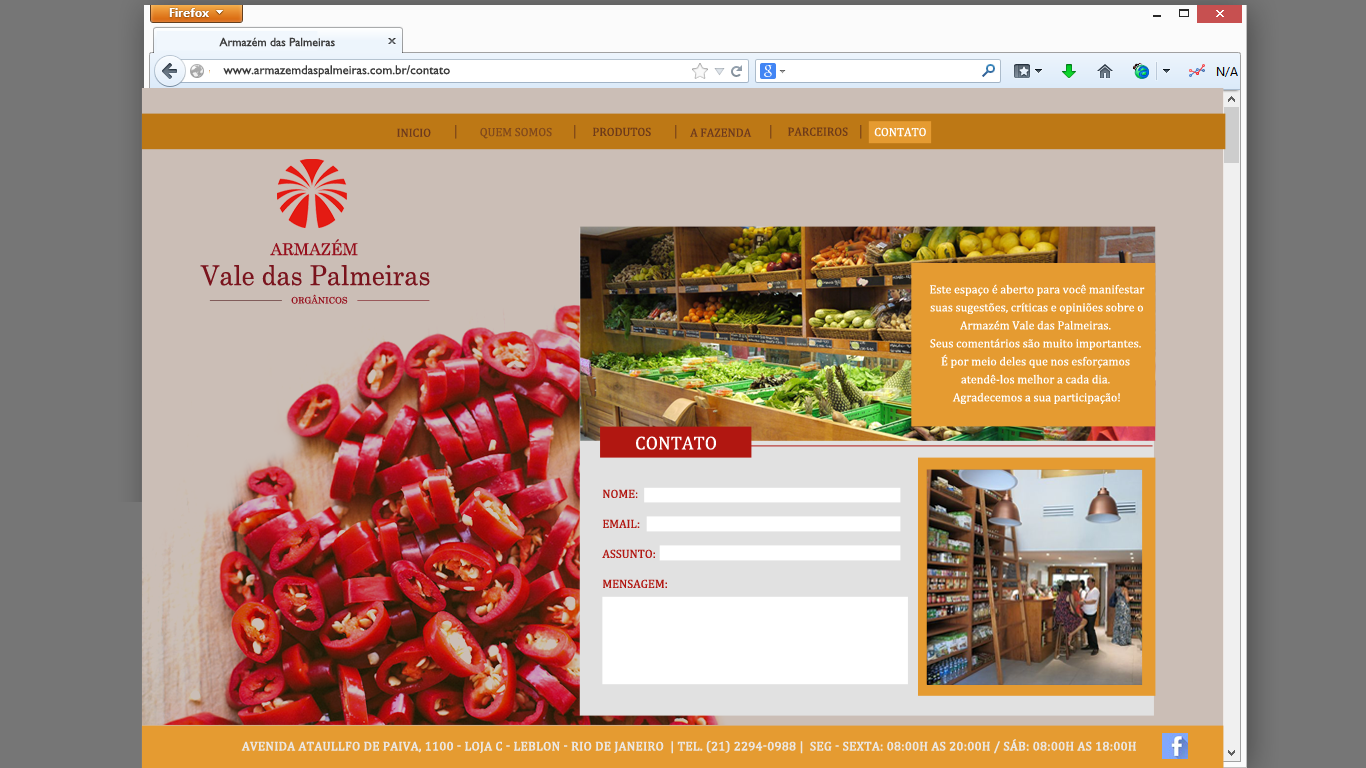
<style>
.page{position:relative;width:1366px;height:768px;background:#cbbeb6}
.page>*{position:absolute;margin:0}
.t1{font:12px "GillSansMT";color:#3c3c3c}
.t2{font:12.8px "GillSansMT";color:#3c3c3c}
.t3{font:12px "Cambria";color:#6d3a1d}
.t4{font:12px "Cambria";color:#81491b}
.t5{font:12px "Cambria";color:#6d3a19}
.t6{font:12px "Cambria";color:#ffffff}
.t7{font:16.2px "Century";color:#96101d}
.t8{font:27.3px "Century";color:#7a141d;scale:0.94 1}
.t9{font:8.9px "Century";color:#96101d}
.t10{font:12px/18px "Cambria";color:#ffffff}
.t11{font:18.8px "Cambria";color:#ffffff}
.t12{font:12px/30px "Cambria";color:#b11711}
.t13{font:12.5px "Cambria";color:#ebe7e2;text-transform:uppercase;font-weight:bold}
</style>
<div class="page">
<p class="t1" style="left:219px;top:37px;width:116px;height:10px">Armazém das Palmeiras</p>
<p class="t2" style="left:223px;top:65px;width:227px;height:13px">www.armazemdaspalmeiras.com.br/contato</p>
<p class="t3" style="left:397px;top:128px;width:34px;height:9px">INICIO</p>
<p class="t4" style="left:480px;top:127px;width:72px;height:12px">QUEM SOMOS</p>
<p class="t5" style="left:593px;top:127px;width:58px;height:9px">PRODUTOS</p>
<p class="t3" style="left:690px;top:128px;width:62px;height:9px">A FAZENDA</p>
<p class="t5" style="left:788px;top:127px;width:60px;height:9px">PARCEIROS</p>
<p class="t6" style="left:874px;top:127px;width:52px;height:10px">CONTATO</p>
<p class="t7" style="left:270px;top:239px;width:88px;height:17px">ARMAZÉM</p>
<p class="t8" style="left:200px;top:265px;width:230px;height:21px">Vale das Palmeiras</p>
<p class="t9" style="left:291px;top:294px;width:57px;height:10px">ORGÂNICOS</p>
<p class="t10" style="left:930px;top:284px;width:215px;height:121px;text-align:center">Este espaço é aberto para você manifestar<br> suas sugestões, críticas e opiniões sobre o <br>Armazém Vale das Palmeiras. <br>Seus comentários são muito importantes. <br>É por meio deles que nos esforçamos <br>atendê-los melhor a cada dia. <br>Agradecemos a sua participação!</p>
<p class="t11" style="left:636px;top:436px;width:80px;height:14px">CONTATO</p>
<p class="t12" style="left:602px;top:489px;width:65px;height:99px;text-align:justify">NOME:<br>EMAIL:<br>ASSUNTO:<br>MENSAGEM:</p>
<p class="t13" style="left:241px;top:739px;width:895px;height:15px">Avenida Ataullfo de Paiva, 1100 - Loja C - Leblon - Rio de Janeiro  | Tel. (21) 2294-0988 |  Seg - Sexta: 08:00h as 20:00h / Sáb: 08:00h as 18:00h</p>
</div>
